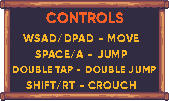
<style>
.page{position:relative;width:169px;height:101px;background:#322c43}
.page>*{position:absolute;margin:0}
.t1{font:14.8px "Gilroy-ExtraBold";color:#fa5f26}
.t2{font:11.5px "Gilroy-ExtraBold";color:#fcb824}
.t3{font:10.5px "Gilroy-ExtraBold";color:#fcb824}
</style>
<div class="page">
<p class="t1" style="left:46px;top:12px;width:77px;height:11px">CONTROLS</p>
<p class="t2" style="left:23px;top:34px;width:116px;height:8px">WSAD/DPAD - MOVE</p>
<p class="t2" style="left:35px;top:50px;width:92px;height:8px">SPACE/A - JUMP</p>
<p class="t3" style="left:13px;top:66px;width:143px;height:7px">DOUBLE TAP - DOUBLE JUMP</p>
<p class="t2" style="left:26px;top:81px;width:110px;height:8px">SHIFT/RT - CROUCH</p>
</div>
